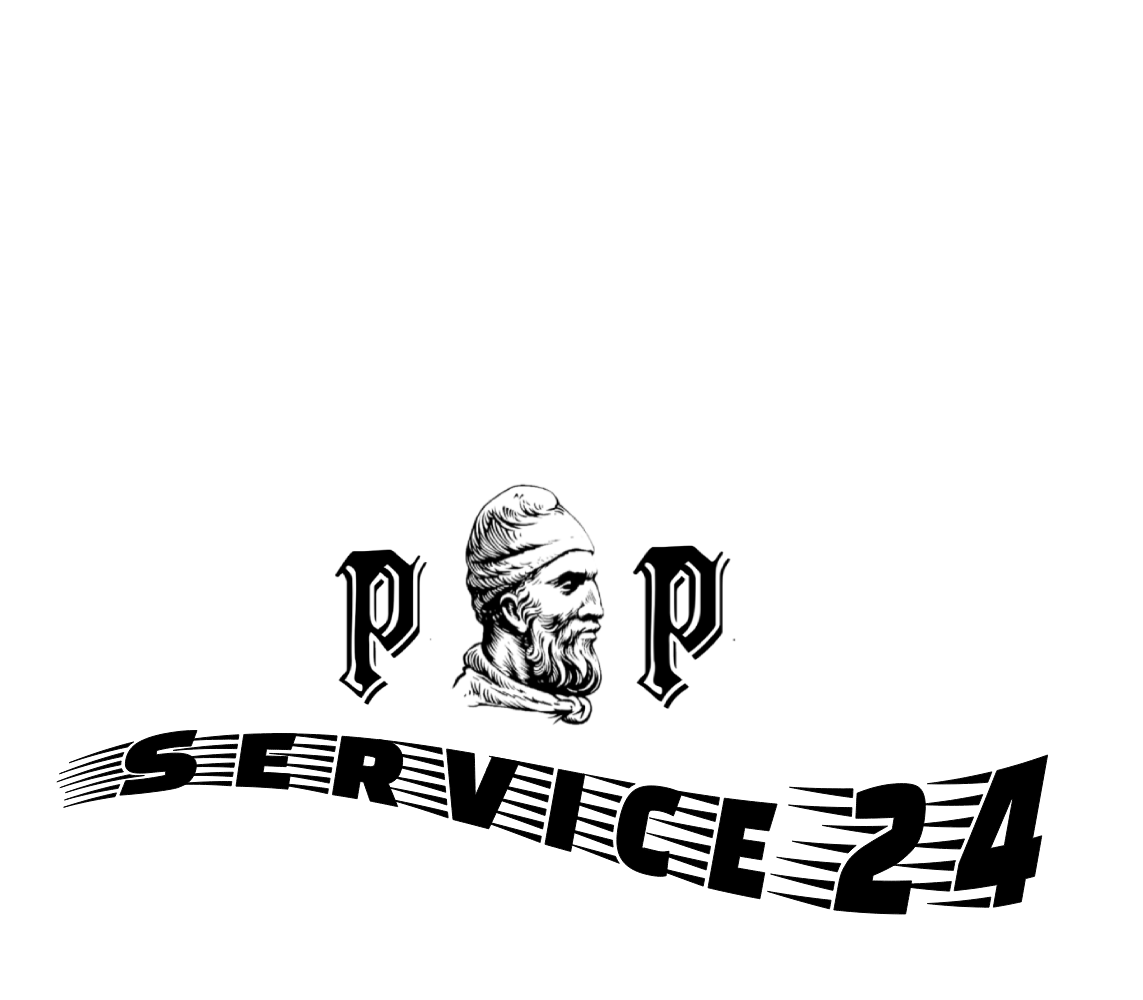
<style>
.page{position:relative;width:1143px;height:1000px;background:#ffffff}
.page>*{position:absolute;margin:0}
.t1{font:150px "FasterOne-Regular";color:#000000}
</style>
<div class="page">
<p class="t1" style="left:55px;top:729px;width:994px;height:186px">Service 24</p>
</div>
